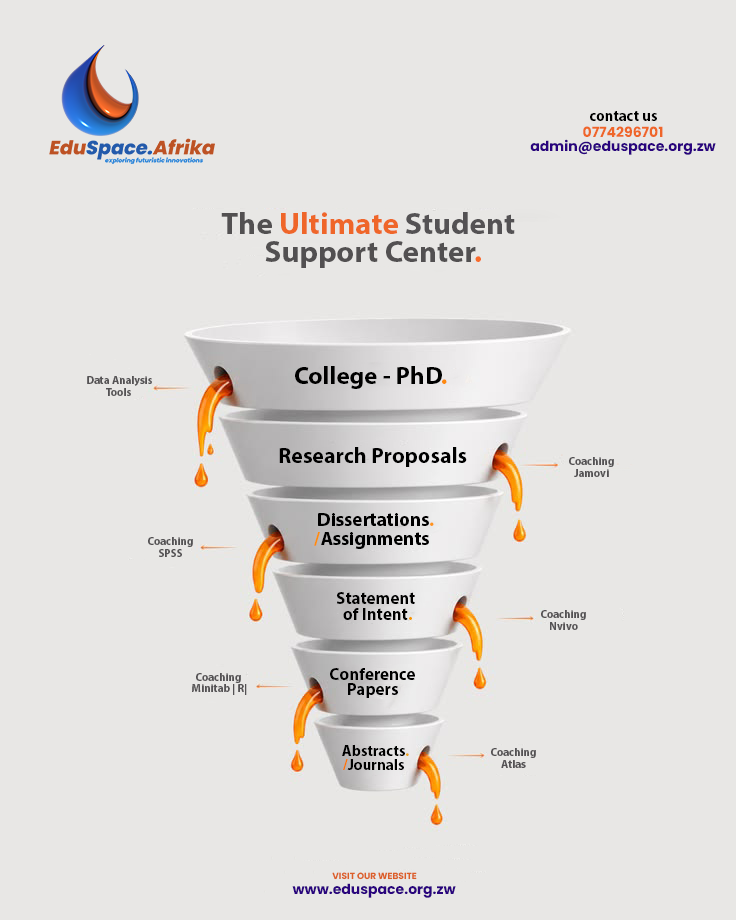
<style>
.page{position:relative;width:736px;height:920px;background:#e8e7e5}
.page>*{position:absolute;margin:0}
.t1{font:15px "MyriadPro-Bold";color:#000000}
.t2{font:14px "Poppins-Bold";color:#ef6629}
.t3{font:14px "Poppins-Bold";color:#2a047e}
.t4{font:31px "MyriadPro-Bold";color:#ef6629}
.t5{font:31px "MyriadPro-Bold";color:#525051}
.t6{font:31px "MyriadPro-Bold";color:#545253}
.t7{font:31px "MyriadPro-Bold";color:#f86c2b}
.t8{font:25px "MyriadPro-Bold";color:#000000}
.t9{font:25px "MyriadPro-Bold";color:#fd8a0e}
.t10{font:11px "MyriadPro-Bold";color:#545254}
.t11{font:22px "MyriadPro-Bold";color:#000000}
.t12{font:19px "MyriadPro-Bold";color:#000000}
.t13{font:19px "MyriadPro-Bold";color:#ff951a}
.t14{font:19px "MyriadPro-Bold";color:#fd8d0d}
.t15{font:17px "MyriadPro-Bold";color:#000000}
.t16{font:17px "MyriadPro-Bold";color:#f79700}
.t17{font:15px "MyriadPro-Bold";color:#eea620}
.t18{font:15px "MyriadPro-Bold";color:#fb7806}
.t19{font:9px "Poppins-Bold";color:#dc5f27}
</style>
<div class="page">
<p class="t1" style="left:590px;top:111px;width:67px;height:10px">contact us</p>
<p class="t2" style="left:583px;top:126px;width:80px;height:11px">0774296701</p>
<p class="t3" style="left:530px;top:139px;width:186px;height:16px">admin@eduspace.org.zw</p>
<p class="t4" style="left:221px;top:212px;width:294px;height:22px"><span class="t5">The </span>Ultimate <span class="t6">Student</span></p>
<p class="t5" style="left:265px;top:241px;width:216px;height:27px">Support Center<span class="t7">.</span></p>
<p class="t8" style="left:295px;top:366px;width:152px;height:23px">College - PhD<span class="t9">.</span></p>
<p class="t10" style="left:87px;top:376px;width:65px;height:10px">Data Analysis</p>
<p class="t10" style="left:106px;top:388px;width:25px;height:8px">Tools</p>
<p class="t11" style="left:279px;top:447px;width:188px;height:20px">Research Proposals</p>
<p class="t10" style="left:569px;top:457px;width:45px;height:10px">Coaching</p>
<p class="t10" style="left:574px;top:469px;width:35px;height:8px">Jamovi</p>
<p class="t12" style="left:318px;top:513px;width:116px;height:13px">Dissertations<span class="t13">.</span></p>
<p class="t12" style="left:314px;top:532px;width:115px;height:17px"><span class="t14">/</span>Assignments</p>
<p class="t10" style="left:148px;top:537px;width:45px;height:10px">Coaching</p>
<p class="t10" style="left:159px;top:549px;width:23px;height:8px">SPSS</p>
<p class="t15" style="left:336px;top:592px;width:79px;height:12px">Statement</p>
<p class="t15" style="left:343px;top:608px;width:69px;height:12px">of Intent<span class="t16">.</span></p>
<p class="t10" style="left:541px;top:610px;width:45px;height:10px">Coaching</p>
<p class="t10" style="left:550px;top:622px;width:28px;height:8px">Nvivo</p>
<p class="t10" style="left:196px;top:673px;width:45px;height:10px">Coaching</p>
<p class="t15" style="left:330px;top:668px;width:85px;height:12px">Conference</p>
<p class="t10" style="left:192px;top:684px;width:55px;height:11px">Minitab | R|</p>
<p class="t15" style="left:348px;top:683px;width:50px;height:15px">Papers</p>
<p class="t1" style="left:342px;top:745px;width:67px;height:11px">Abstracts<span class="t17">.</span></p>
<p class="t10" style="left:491px;top:748px;width:45px;height:10px">Coaching</p>
<p class="t1" style="left:343px;top:759px;width:61px;height:11px"><span class="t18">/</span>Journals</p>
<p class="t10" style="left:501px;top:760px;width:25px;height:8px">Atlas</p>
<p class="t19" style="left:332px;top:872px;width:85px;height:8px">VISIT OUR WEBSITE</p>
<p class="t3" style="left:292px;top:883px;width:164px;height:15px">www.eduspace.org.zw</p>
</div>
